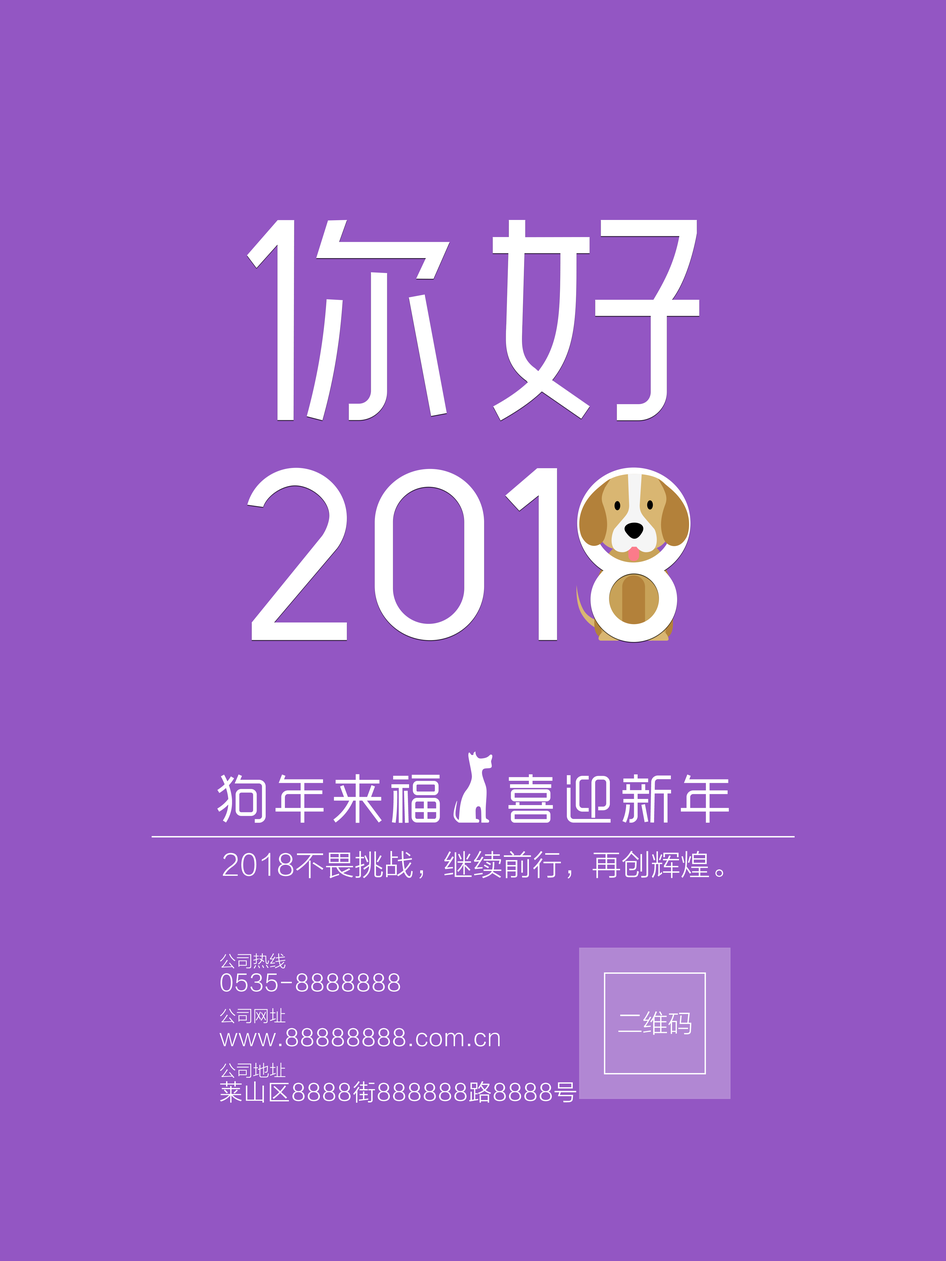
<style>
.page{position:relative;width:946px;height:1261px;background:#9356c3}
.page>*{position:absolute;margin:0}
.t1{font:52.8px "MFYueHei_Noncommercial-Regular";letter-spacing:0.1em;color:#ffffff}
.t2{font:28.9px "FZLTXHK--GBK1-0";letter-spacing:0.025em;color:#ffffff}
.t3{font:22.8px/23px "FZLTXHK--GBK1-0";letter-spacing:0.025em;color:#ffffff;font-weight:bold}
.t4{font:16.3px/18.2px "FZLTXHK--GBK1-0";letter-spacing:0.025em;color:#ffffff}
.t5{font:22.8px/18.2px "FZLTXHK--GBK1-0";letter-spacing:0.025em;color:#ffffff;font-weight:bold}
.t6{font:25.1px "FZLTXHK--GBK1-0";color:#ffffff}
</style>
<div class="page">
<p class="t1" style="left:217px;top:774px;width:512px;height:49px">狗年来福   喜迎新年</p>
<p class="t2" style="left:223px;top:851px;width:500px;height:28px">2018不畏挑战，继续前行，再创辉煌。</p>
<p class="t3" style="left:219px;top:953px;width:357px;height:150px"><span class="t4">公司热线<br></span><span class="t5">0535-8888888<br><br></span><span class="t4">公司网址<br></span><span class="t5">www.88888888.com.cn<br></span><span class="t4"><br>公司地址<br></span>莱山区8888街888888路8888号</p>
<p class="t6" style="left:618px;top:1011px;width:73px;height:24px">二维码</p>
</div>
